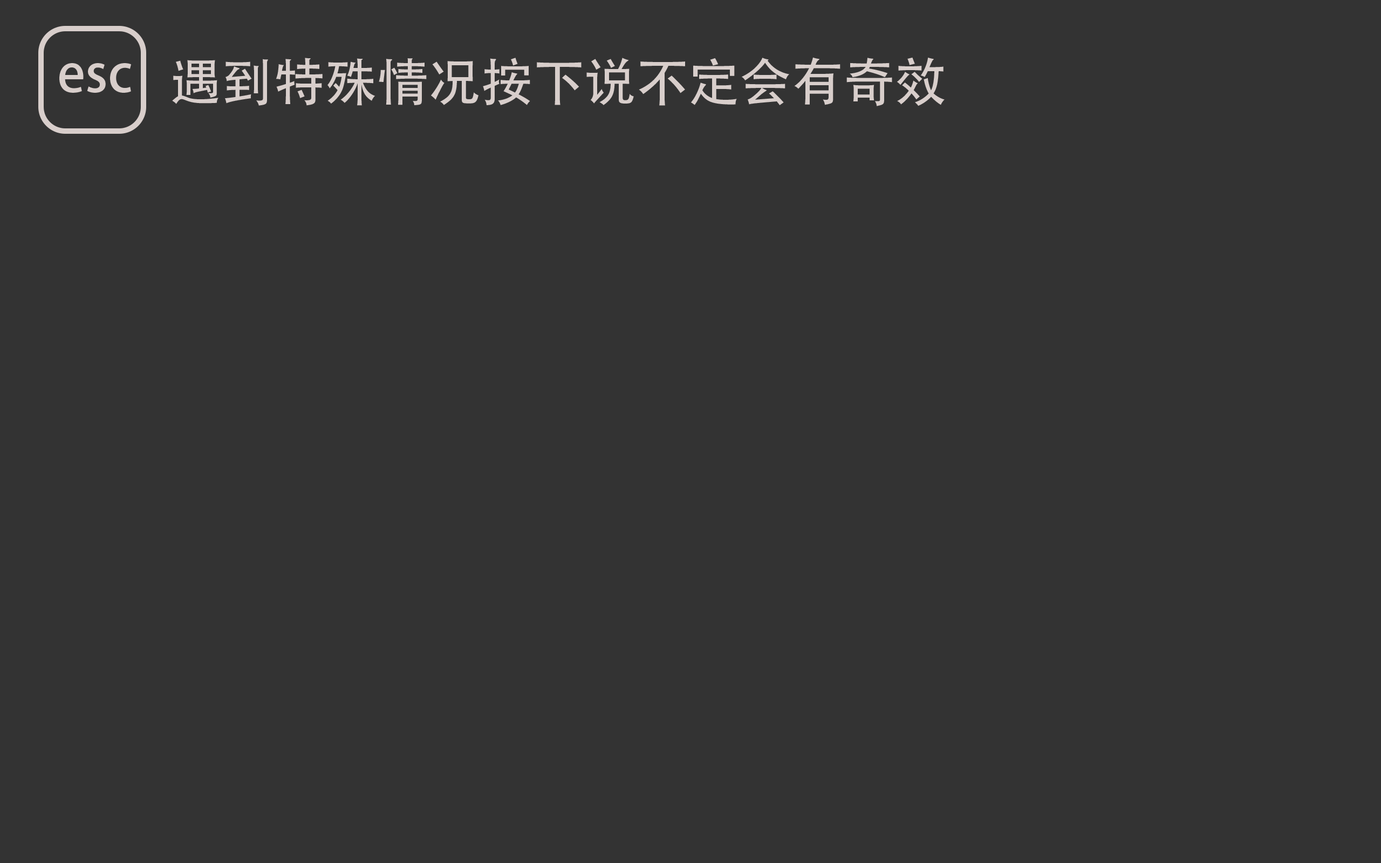
<style>
.page{position:relative;width:1381px;height:863px;background:#333333}
.page>*{position:absolute;margin:0}
.t1{font:51.8px "AdobeHeitiStd-Regular";color:#d8cecb}
</style>
<div class="page">
<p class="t1" style="left:59px;top:63px;width:72px;height:30px">esc</p>
<p class="t1" style="left:172px;top:57px;width:773px;height:49px">遇到特殊情况按下说不定会有奇效</p>
</div>
